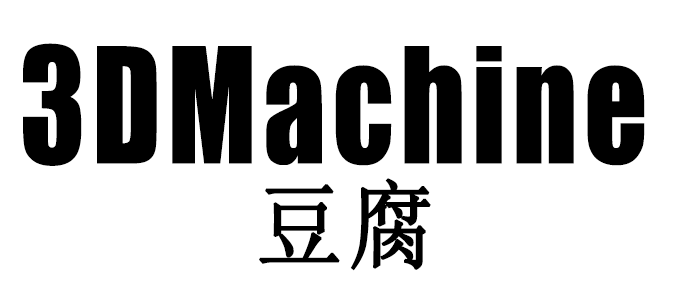
<style>
.page{position:relative;width:680px;height:300px;background:#ffffff}
.page>*{position:absolute;margin:0}
.t1{font:148.6px/23.9px "Impact";letter-spacing:0.05em;color:#000000;scale:0.84 1}
.t2{font:95.6px/23.9px "SimSun";letter-spacing:0.05em;color:#000000;font-weight:bold;scale:0.9 1}
</style>
<div class="page">
<p class="t1" style="left:23px;top:43px;width:622px;height:228px">3DMachine<br><br><br><br>     <span class="t2">豆腐</span></p>
</div>
